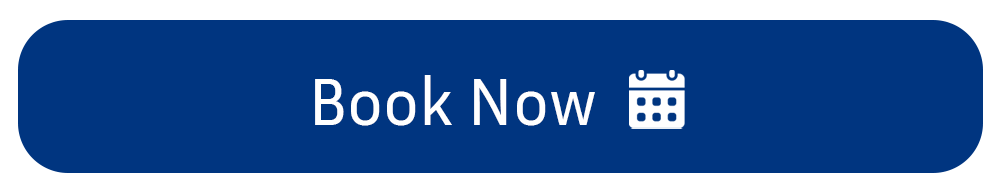
<style>
.page{position:relative;width:1000px;height:196px;background:#003580}
.page>*{position:absolute;margin:0}
.t1{font:66.7px "InriaSans-Regular";color:#ffffff}
</style>
<div class="page">
<p class="t1" style="left:315px;top:75px;width:280px;height:51px">Book Now</p>
</div>
